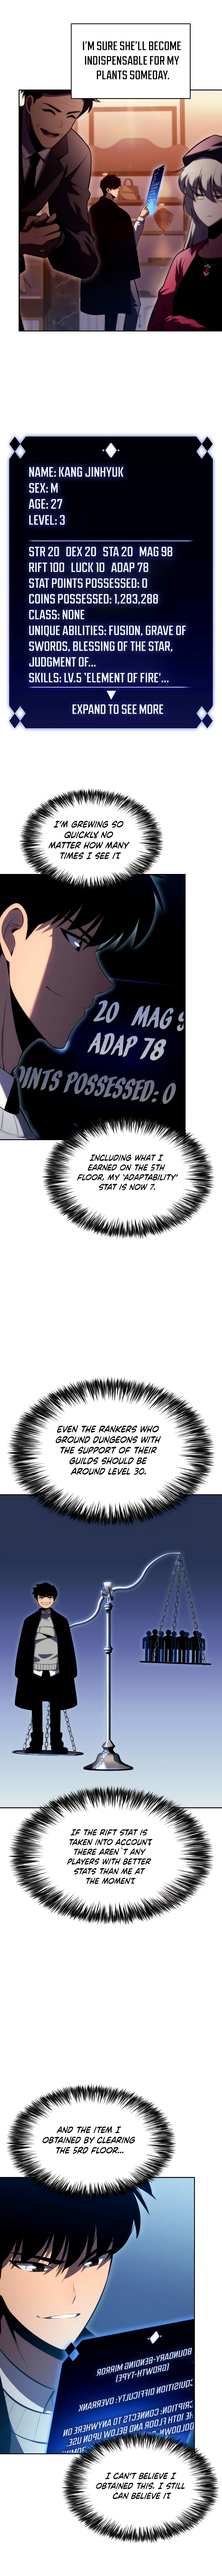
<style>
.page{position:relative;width:222px;height:2576px;background:#ffffff}
.page>*{position:absolute;margin:0}
.t1{font:12.1px "CCUltimatumMass-Regular";color:#000000;text-transform:uppercase}
.t2{font:13.1px "CCUltimatumMass-Regular";color:#f5fbfb;text-transform:uppercase}
.t3{font:13.3px "CCUltimatumMass-Regular";color:#f5fbfb;text-transform:uppercase}
.t4{font:8.7px "CCVictorySpeechW00-Italic";color:#000000}
.t5{font:26.6px "OrangeFizzItalic"}
.t6{font:8.1px "CCVictorySpeechW00-Italic";color:#000000}
.t7{font:8.8px "CCVictorySpeechW00-Italic";color:#000000}
.t8{font:8.5px "CCVictorySpeechW00-Italic";color:#000000}
.t9{font:8.3px "CCVictorySpeechW00-Italic";color:#000000}
</style>
<div class="page">
<p class="t1" style="left:83px;top:41px;width:98px;height:38px;text-align:center">I’m sure she’ll become indispensable for my plants someday.</p>
<p class="t2" style="left:29px;top:467px;width:157px;height:247px"><span class="t3">Name: Kang Jinhyuk<br>Sex: M<br>Age: 27<br>Level: 3<br></span><br>STR 20   DEX 20   STA 20   MAG 98<br>RIFT 100   LUCK 10   ADAP 78<br>Stat Points Possessed: 0<br>Coins Possessed: 1,283,288<br>Class: None<br>Unique Abilities: Fusion, Grave of  Swords, Blessing of the Star, <br>Judgment of...<br>Skills: Lv.5 ‘Element of Fire'...<br><br>Expand to See More</p>
<p class="t4" style="left:49px;top:820px;width:81px;height:39px;text-align:center">I’m grewing so quickly, no matter how many times I see it.</p>
<p class="t5" style="left:58px;top:997px;width:146px;height:64px;text-align:center;rotate:6deg">STA 20   MAG 98<br>ADAP 78</p>
<p class="t6" style="left:77px;top:1154px;width:102px;height:36px;text-align:center">Including what I earned on the 5th floor, my ‘Adaptability’ stat is now 7.</p>
<p class="t7" style="left:56px;top:1425px;width:105px;height:50px;text-align:center">Even the Rankers who ground dungeons with the support of their guilds should be around Level 30.</p>
<p class="t6" style="left:67px;top:1829px;width:86px;height:55px;text-align:center">If the Rift stat is taken into account, there aren`t any players with better stats than me at the moment.</p>
<p class="t8" style="left:43px;top:2126px;width:92px;height:28px;text-align:center">And the item I obtained by clearing the 5rd floor...</p>
<p class="t9" style="left:96px;top:2472px;width:89px;height:27px;text-align:center">I can’t believe I obtained this. I still can believe it.</p>
</div>
